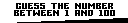
<style>
.page{position:relative;width:128px;height:23px;background:#ffffff}
.page>*{position:absolute;margin:0}
.t1{font:16.9px "Gamer";letter-spacing:-0.02em;color:#000000}
</style>
<div class="page">
<p class="t1" style="left:14px;top:3px;width:101px;height:13px;text-align:center">GUESS THE NUMBER<br>BETWEEN 1 AND 100</p>
</div>
